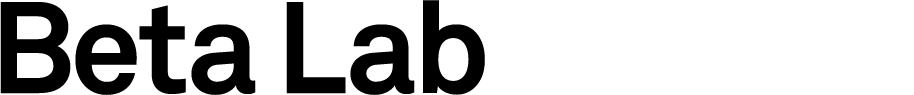
<style>
.page{position:relative;width:914px;height:95px;background:#ffffff}
.page>*{position:absolute;margin:0}
.t1{font:128.3px "AkkuratPro-Bold";letter-spacing:-0.04em;color:#000000}
.t2{font:128.3px "AkkuratPro-Bold";letter-spacing:-0.04em;color:#ffffff}
</style>
<div class="page">
<p class="t1" style="left:0px;top:0px;width:914px;height:95px">Beta Lab <span class="t2">Limited</span></p>
</div>
